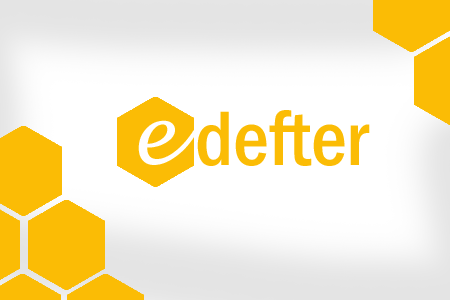
<style>
.page{position:relative;width:450px;height:300px;background:#ffffff}
.page>*{position:absolute;margin:0}
.t1{font:80px "FranklinGothic-MediumCond";color:#fbbc05}
.t2{font:80px "LucidaHandwriting-Italic";color:#fffefe}
</style>
<div class="page">
<p class="t1" style="left:197px;top:110px;width:173px;height:56px">defter</p>
<p class="t2" style="left:138px;top:120px;width:59px;height:45px">e</p>
</div>
